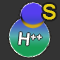
<style>
.page{position:relative;width:60px;height:60px;background:#333333}
.page>*{position:absolute;margin:0}
.t1{font:20.7px "ArialMT";color:#e6d017;font-weight:bold}
.t2{font:16.5px "ArialMT";color:#fefefd;font-weight:bold}
</style>
<div class="page">
<p class="t1" style="left:43px;top:4px;width:13px;height:16px">S</p>
<p class="t2" style="left:18px;top:32px;width:24px;height:14px;rotate:6deg">H++</p>
</div>
